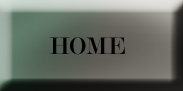
<style>
.page{position:relative;width:183px;height:91px}
.page>*{position:absolute;margin:0}
.t1{font:25.4px "Modern-Regular";color:#000000}
</style>
<div class="page">
<p class="t1" style="left:49px;top:37px;width:76px;height:18px">HOME</p>
</div>
